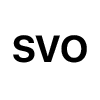
<style>
.page{position:relative;width:100px;height:100px;background:#ffffff}
.page>*{position:absolute;margin:0}
.t1{font:37.5px "SFProDisplay-Bold";color:#000000}
</style>
<div class="page">
<p class="t1" style="left:13px;top:35px;width:74px;height:28px">SVO</p>
</div>
